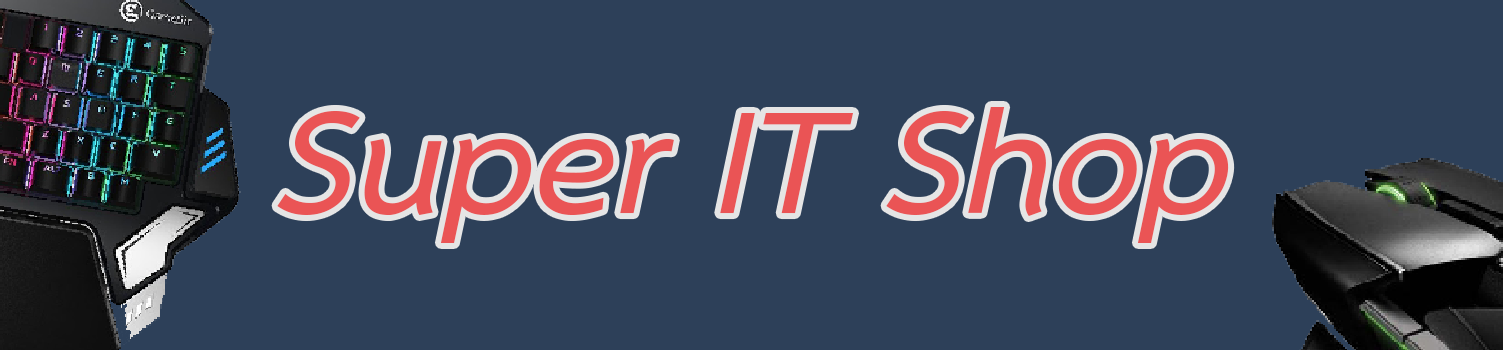
<style>
.page{position:relative;width:1503px;height:350px;background:#2d4059}
.page>*{position:absolute;margin:0}
.t1{font:211px "THSarabunPSK-BoldItalic";color:#ea5455}
</style>
<div class="page">
<p class="t1" style="left:277px;top:107px;width:952px;height:136px">Super IT Shop</p>
</div>
